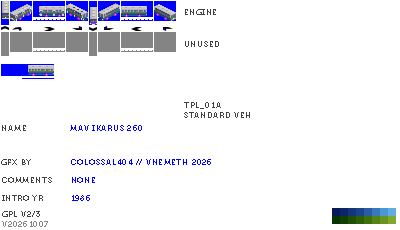
<style>
.page{position:relative;width:400px;height:230px;background:#ffffff}
.page>*{position:absolute;margin:0}
.t1{font:8px "Museo700-Regular";letter-spacing:0.075em;color:#404040;text-transform:uppercase}
.t2{font:8px "Museo700-Regular";letter-spacing:0.075em;color:#0000ff;text-transform:uppercase}
.t3{font:8px "Museo700-Regular";letter-spacing:0.075em;color:#848484;text-transform:uppercase}
</style>
<div class="page">
<p class="t1" style="left:185px;top:9px;width:31px;height:6px">engine</p>
<p class="t1" style="left:185px;top:41px;width:34px;height:6px">unused</p>
<p class="t1" style="left:184px;top:102px;width:66px;height:16px">tpl_01a<br>standard veh</p>
<p class="t1" style="left:2px;top:125px;width:24px;height:6px">name</p>
<p class="t2" style="left:70px;top:125px;width:72px;height:6px">mav ikarus 260</p>
<p class="t1" style="left:1px;top:159px;width:30px;height:6px">gfx by</p>
<p class="t2" style="left:71px;top:159px;width:140px;height:6px">colossal404 // vnemeth 2026</p>
<p class="t1" style="left:2px;top:177px;width:50px;height:6px">comments</p>
<p class="t2" style="left:72px;top:177px;width:23px;height:6px">none</p>
<p class="t1" style="left:2px;top:195px;width:41px;height:6px">intro yr</p>
<p class="t2" style="left:72px;top:195px;width:18px;height:6px">1986</p>
<p class="t3" style="left:2px;top:221px;width:46px;height:6px">v20261007</p>
<p class="t1" style="left:2px;top:211px;width:38px;height:6px">gpl v2/3</p>
</div>
